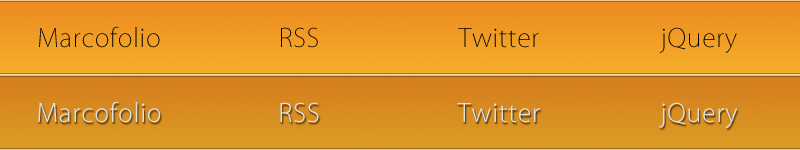
<style>
.page{position:relative;width:800px;height:150px}
.page>*{position:absolute;margin:0}
.t1{font:25px "KozGoPro-ExtraLight";letter-spacing:0.03em;color:#000000}
.t2{font:25px "KozGoPro-Light";letter-spacing:0.03em;color:#e1e1e1}
</style>
<div class="page">
<p class="t1" style="left:39px;top:26px;width:121px;height:22px">Marcofolio</p>
<p class="t1" style="left:281px;top:27px;width:37px;height:21px">RSS</p>
<p class="t1" style="left:458px;top:28px;width:81px;height:20px">Twitter</p>
<p class="t1" style="left:659px;top:27px;width:78px;height:26px">jQuery</p>
<p class="t2" style="left:38px;top:101px;width:123px;height:22px">Marcofolio</p>
<p class="t2" style="left:280px;top:102px;width:39px;height:21px">RSS</p>
<p class="t2" style="left:659px;top:102px;width:79px;height:27px">jQuery</p>
<p class="t2" style="left:457px;top:103px;width:83px;height:20px">Twitter</p>
</div>
